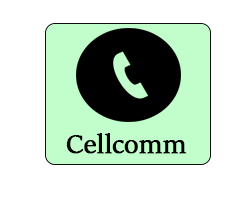
<style>
.page{position:relative;width:250px;height:200px;background:#ffffff}
.page>*{position:absolute;margin:0}
.t1{font:30px "SitkaBanner";color:#000000;font-weight:bold}
</style>
<div class="page">
<p class="t1" style="left:66px;top:133px;width:121px;height:21px">Cellcomm</p>
</div>
